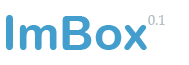
<style>
.page{position:relative;width:189px;height:65px;background:#ffffff}
.page>*{position:absolute;margin:0}
.t1{font:48px "ArialRoundedMTBold";color:#449ecd}
.t2{font:14px "BookAntiqua";color:#b5c0c6}
</style>
<div class="page">
<p class="t1" style="left:6px;top:15px;width:141px;height:35px">ImBox</p>
<p class="t2" style="left:148px;top:15px;width:17px;height:10px">0.1</p>
</div>
